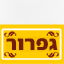
<style>
.page{position:relative;width:64px;height:64px;background:#ffcc00}
.page>*{position:absolute;margin:0}
.t1{font:23.8px "FbAlbatros-Black";color:#731d0c}
</style>
<div class="page">
<p class="t1" style="left:6px;top:38px;width:52px;height:13px">גפרור</p>
</div>
